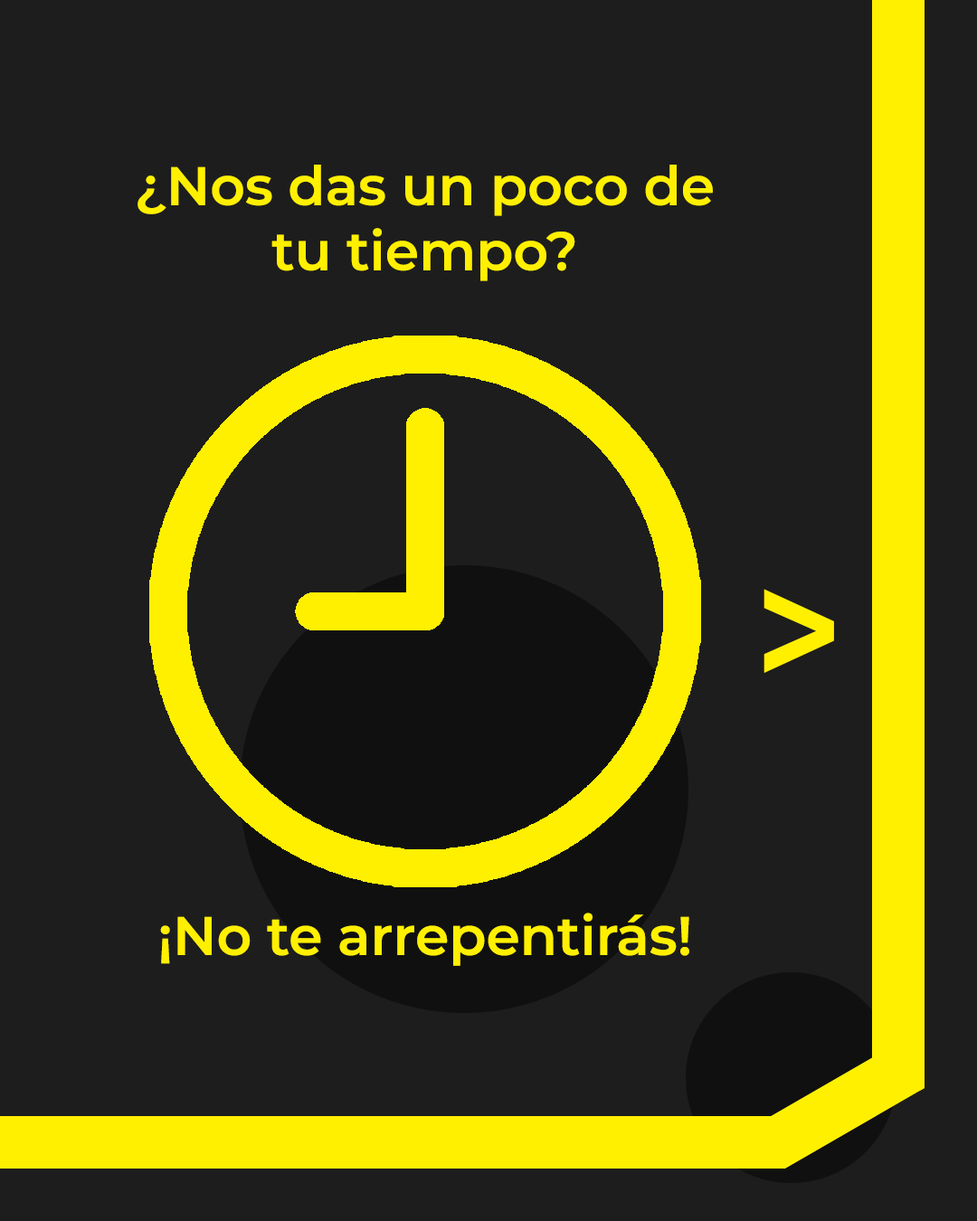
<style>
.page{position:relative;width:977px;height:1221px;background:#1d1d1d}
.page>*{position:absolute;margin:0}
.t1{font:54.3px "Montserrat-SemiBold";color:#fff000}
.t2{font:179.1px "Montserrat-SemiBold";color:#fff000;scale:0.84 1}
</style>
<div class="page">
<p class="t1" style="left:137px;top:165px;width:576px;height:116px;text-align:center">¿Nos das un poco de tu tiempo?</p>
<p class="t2" style="left:763px;top:589px;width:71px;height:84px">&gt;</p>
<p class="t1" style="left:160px;top:912px;width:529px;height:54px">¡No te arrepentirás!</p>
</div>
